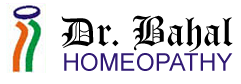
<style>
.page{position:relative;width:241px;height:84px;background:#ffffff}
.page>*{position:absolute;margin:0}
.t1{font:41.1px "OldEnglishTextMT";color:#000000}
.t2{font:24.5px "ArialMT";color:#301974}
</style>
<div class="page">
<p class="t1" style="left:61px;top:15px;width:172px;height:37px">Dr. Bahal</p>
<p class="t2" style="left:64px;top:53px;width:169px;height:18px">HOMEOPATHY</p>
</div>
